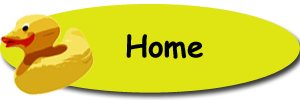
<style>
.page{position:relative;width:300px;height:100px;background:#dee513}
.page>*{position:absolute;margin:0}
.t1{font:30px "ComicSansMS-Bold";color:#000000}
</style>
<div class="page">
<p class="t1" style="left:126px;top:34px;width:77px;height:25px">Home</p>
</div>
